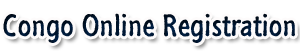
<style>
.page{position:relative;width:300px;height:53px;background:#ffffff}
.page>*{position:absolute;margin:0}
.t1{font:31.1px "SegoeMarker";color:#00152e}
</style>
<div class="page">
<p class="t1" style="left:3px;top:13px;width:292px;height:30px">Congo Online Registration</p>
</div>
